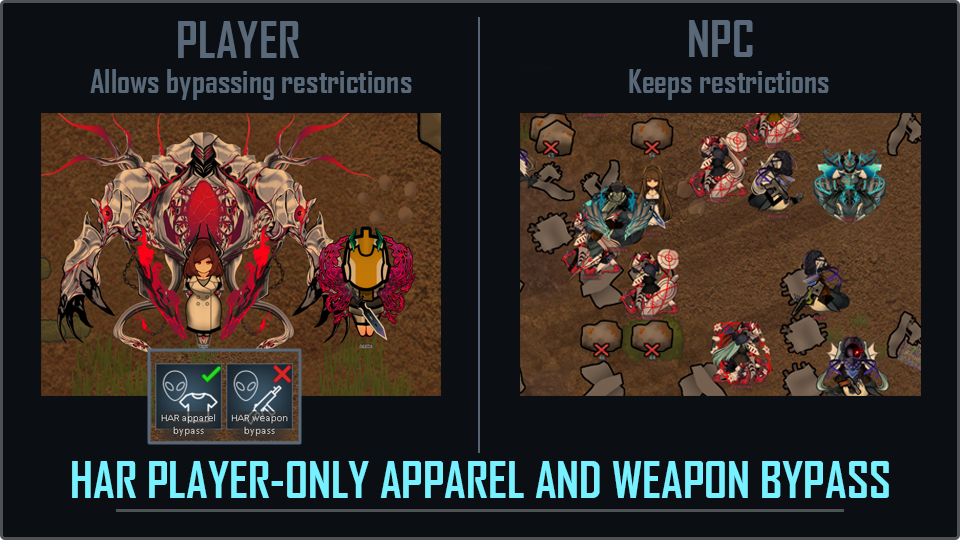
<style>
.page{position:relative;width:960px;height:540px;background:#0b0f13}
.page>*{position:absolute;margin:0}
.t1{font:48px "AgencyFB-Bold";color:#596979}
.t2{font:32px "AgencyFB-Bold";color:#596979}
.t3{font:48px "AgencyFB-Bold";color:#77f0ff}
</style>
<div class="page">
<p class="t1" style="left:178px;top:21px;width:121px;height:37px">PLAYER</p>
<p class="t1" style="left:689px;top:20px;width:64px;height:37px">NPC</p>
<p class="t2" style="left:90px;top:69px;width:322px;height:31px">Allows bypassing restrictions</p>
<p class="t2" style="left:629px;top:69px;width:200px;height:31px">Keeps restrictions</p>
<p class="t3" style="left:72px;top:461px;width:817px;height:37px">HAR PLAYER-ONLY APPAREL AND WEAPON BYPASS</p>
</div>
